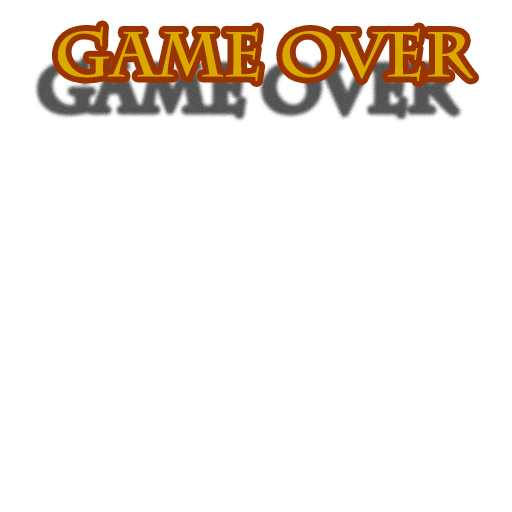
<style>
.page{position:relative;width:512px;height:512px;background:#ffffff}
.page>*{position:absolute;margin:0}
.t1{font:63px "CharlemagneStd-Bold";color:#dba800}
</style>
<div class="page">
<p class="t1" style="left:58px;top:26px;width:416px;height:55px">Game over</p>
</div>
